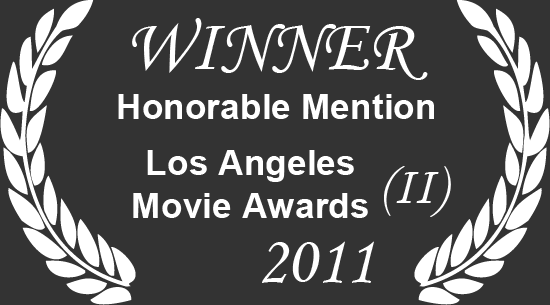
<style>
.page{position:relative;width:550px;height:305px;background:#333333}
.page>*{position:absolute;margin:0}
.t1{font:73.8px "MonotypeCorsiva";color:#ffffff}
.t2{font:35.4px "Arial-BoldMT";color:#ffffff}
.t3{font:54.2px "MonotypeCorsiva";color:#ffffff}
.t4{font:66.7px "MonotypeCorsiva";color:#ffffff}
</style>
<div class="page">
<p class="t1" style="left:132px;top:18px;width:296px;height:62px">WINNER</p>
<p class="t2" style="left:118px;top:94px;width:316px;height:25px">Honorable Mention</p>
<p class="t2" style="left:133px;top:150px;width:235px;height:68px;text-align:center">Los Angeles<br>Movie Awards</p>
<p class="t3" style="left:384px;top:166px;width:67px;height:51px">(II)</p>
<p class="t4" style="left:262px;top:241px;width:112px;height:42px">2011</p>
</div>
